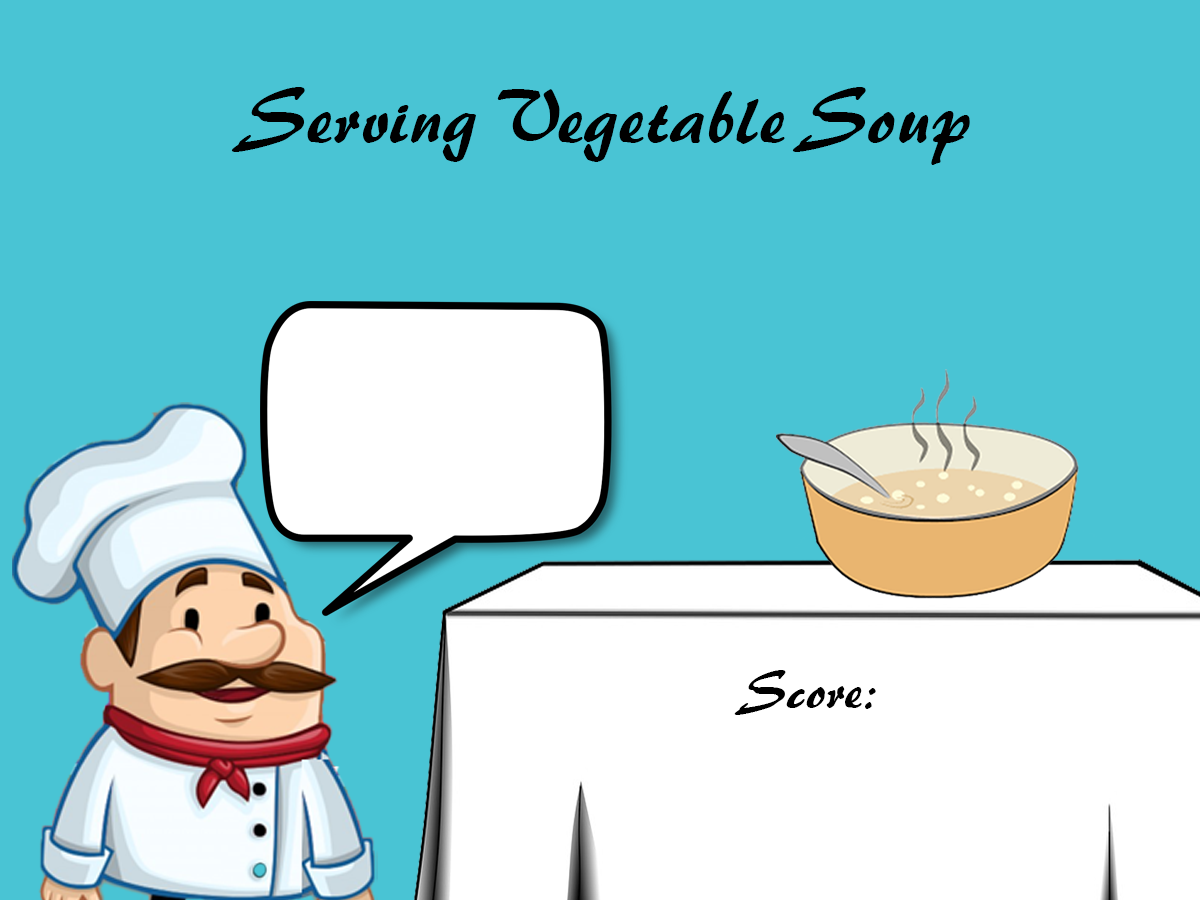
<style>
.page{position:relative;width:1200px;height:900px;background:#49c4d4}
.page>*{position:absolute;margin:0}
.t1{font:72px "Brush455BT-Regular";color:#000000}
.t2{font:50px "Brush455BT-Regular";color:#000000}
</style>
<div class="page">
<p class="t1" style="left:231px;top:87px;width:739px;height:78px">Serving Vegetable Soup</p>
<p class="t2" style="left:734px;top:670px;width:142px;height:45px">Score:</p>
</div>
